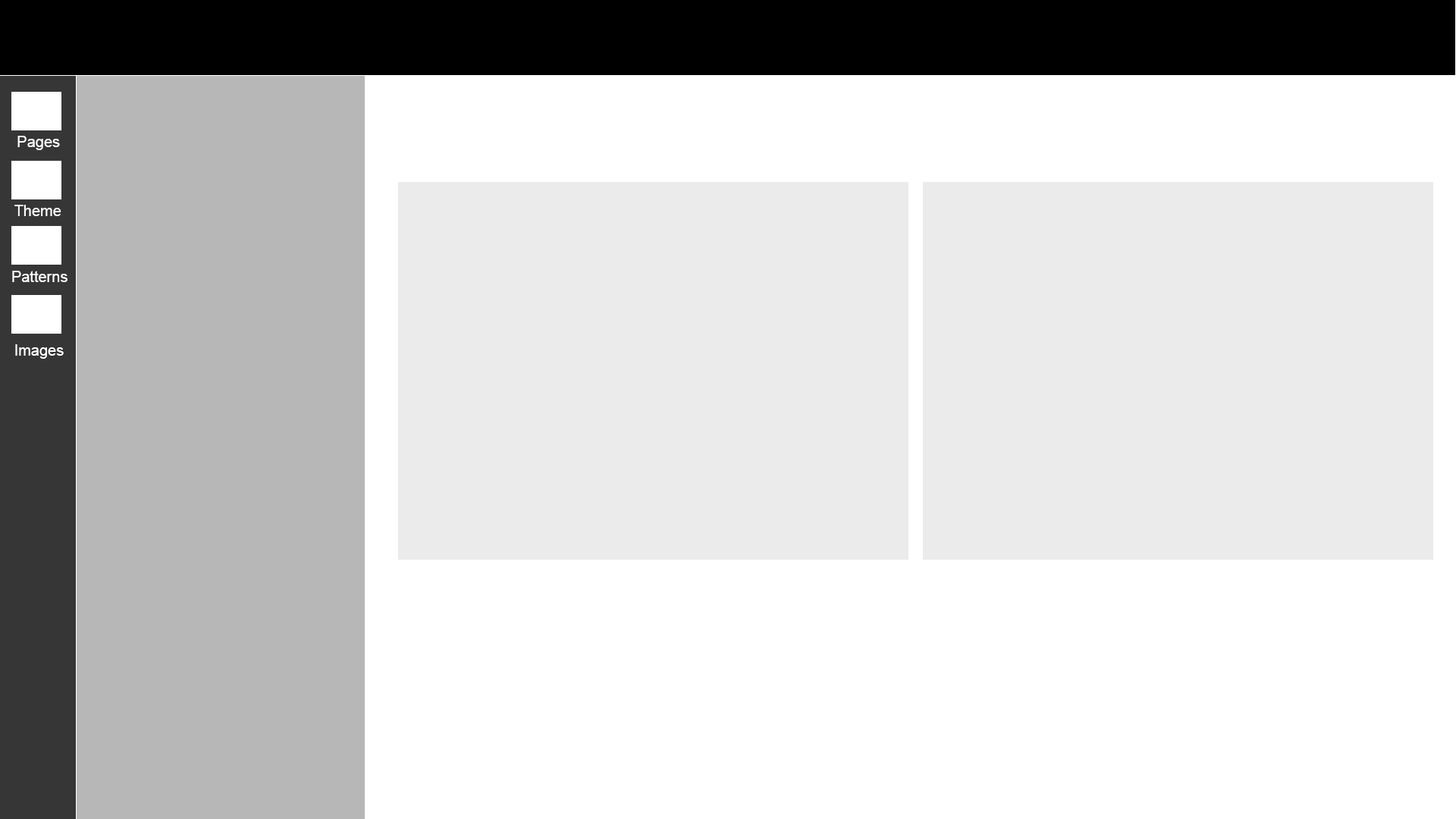
<style>
.page{position:relative;width:1456px;height:819px;background:#ffffff}
.page>*{position:absolute;margin:0}
.t1{font:15.2px "ArialMT";color:#ffffff}
</style>
<div class="page">
<p class="t1" style="left:17px;top:136px;width:43px;height:14px">Pages</p>
<p class="t1" style="left:14px;top:205px;width:47px;height:11px">Theme</p>
<p class="t1" style="left:12px;top:271px;width:55px;height:11px">Patterns</p>
<p class="t1" style="left:15px;top:344px;width:49px;height:15px">Images</p>
</div>
